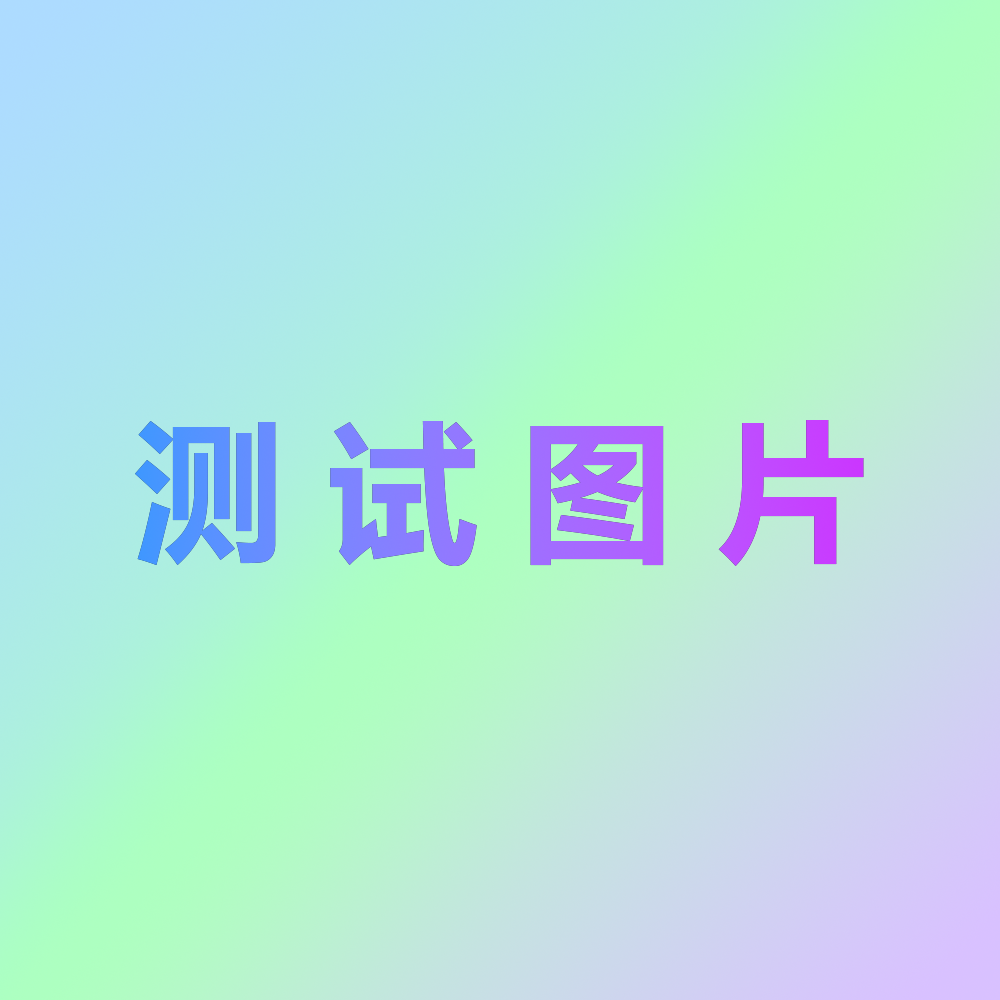
<style>
.page{position:relative;width:1000px;height:1000px}
.page>*{position:absolute;margin:0}
.t1{font:150px "MicrosoftYaHei-Bold"}
</style>
<div class="page">
<p class="t1" style="left:135px;top:420px;width:729px;height:146px">测 试 图 片</p>
</div>
